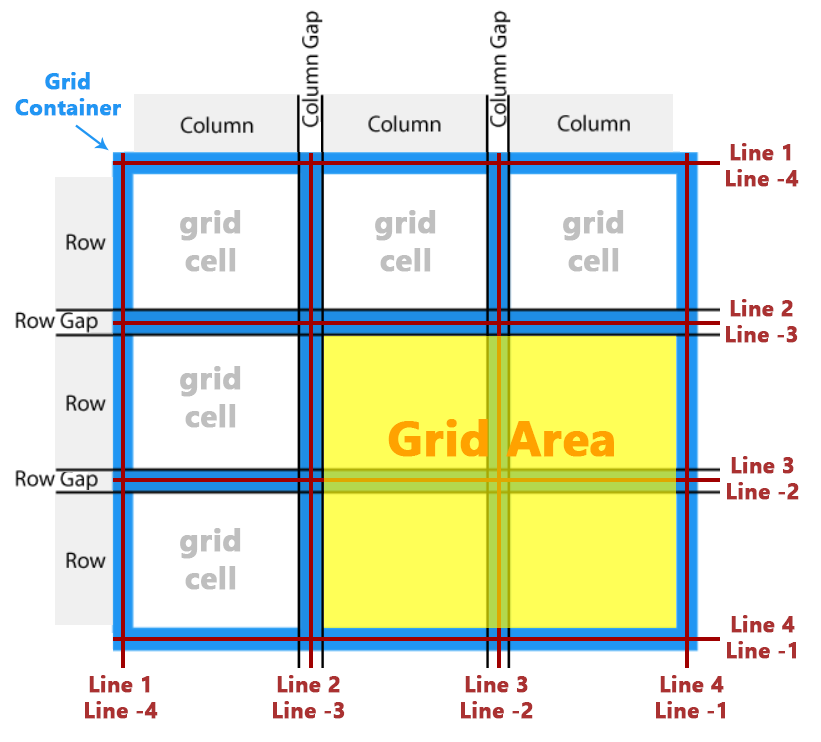
<style>
.page{position:relative;width:821px;height:742px;background:#ffffff}
.page>*{position:absolute;margin:0}
.t1{font:22px "NirmalaUI-Bold";color:#2196f3;font-weight:bold}
.t2{font:22px "NirmalaUI-Bold";color:#aa3131;font-weight:bold}
.t3{font:31px "NirmalaUI-Bold";color:#bebebe;font-weight:bold}
.t4{font:49px "NirmalaUI-Bold";color:#fea100;font-weight:bold}
</style>
<div class="page">
<p class="t1" style="left:15px;top:72px;width:106px;height:44px;text-align:center">Grid<br>Container</p>
<p class="t2" style="left:726px;top:143px;width:73px;height:44px;text-align:center">Line 1<br>Line -4</p>
<p class="t3" style="left:180px;top:210px;width:61px;height:62px;text-align:center">grid<br>cell</p>
<p class="t3" style="left:375px;top:210px;width:61px;height:62px;text-align:center">grid<br>cell</p>
<p class="t3" style="left:563px;top:210px;width:61px;height:62px;text-align:center">grid<br>cell</p>
<p class="t2" style="left:726px;top:299px;width:72px;height:44px;text-align:center">Line 2<br>Line -3</p>
<p class="t3" style="left:180px;top:366px;width:61px;height:62px;text-align:center">grid<br>cell</p>
<p class="t4" style="left:388px;top:419px;width:226px;height:38px">Grid Area</p>
<p class="t2" style="left:727px;top:456px;width:72px;height:44px;text-align:center">Line 3<br>Line -2</p>
<p class="t3" style="left:180px;top:528px;width:61px;height:62px;text-align:center">grid<br>cell</p>
<p class="t2" style="left:727px;top:615px;width:69px;height:44px;text-align:center">Line 4<br>Line -1</p>
<p class="t2" style="left:85px;top:675px;width:73px;height:44px;text-align:center">Line 1<br>Line -4</p>
<p class="t2" style="left:273px;top:675px;width:72px;height:44px;text-align:center">Line 2<br>Line -3</p>
<p class="t2" style="left:461px;top:675px;width:72px;height:44px;text-align:center">Line 3<br>Line -2</p>
<p class="t2" style="left:656px;top:675px;width:69px;height:44px;text-align:center">Line 4<br>Line -1</p>
</div>
